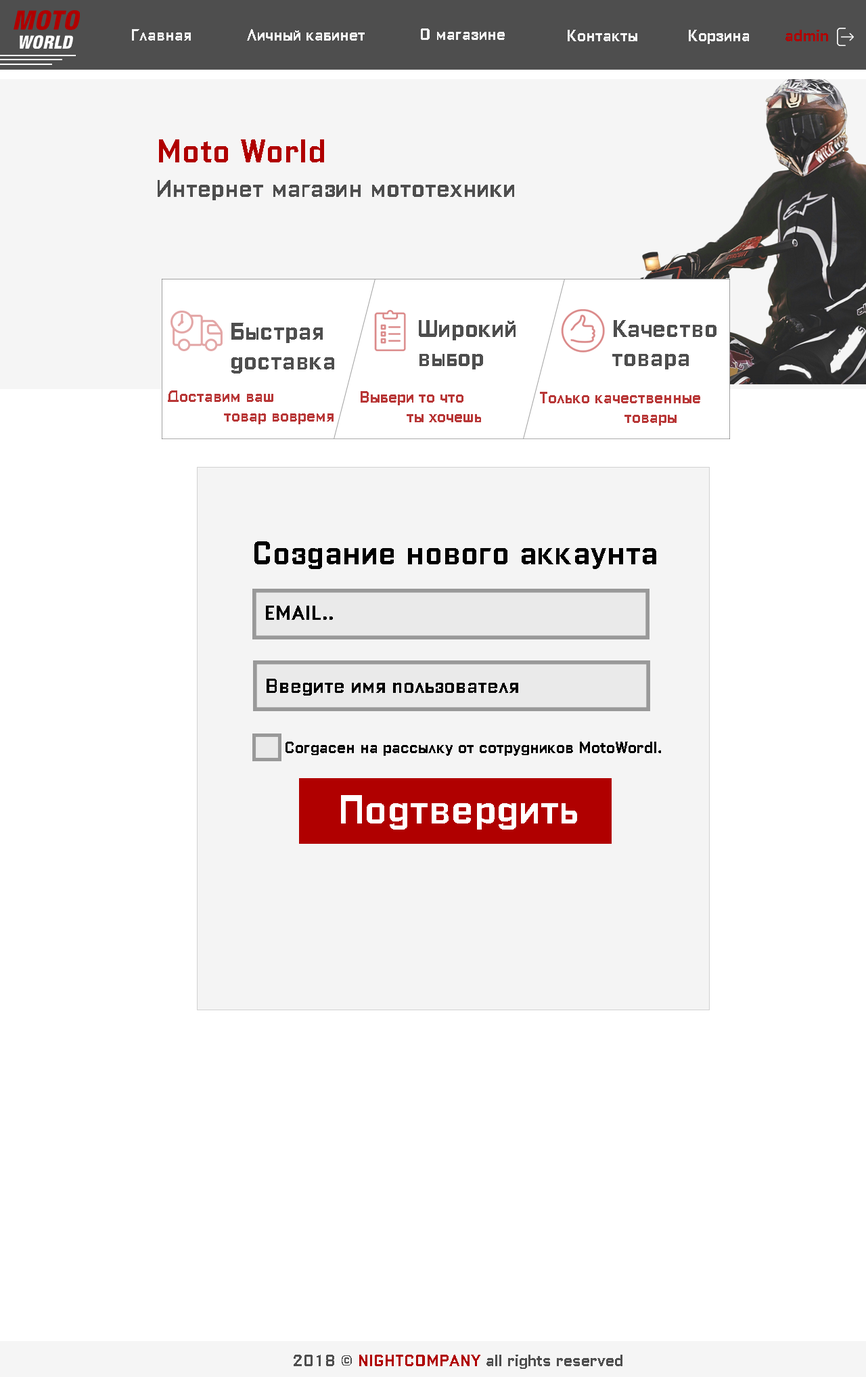
<style>
.page{position:relative;width:866px;height:1377px;background:#ffffff}
.page>*{position:absolute;margin:0}
.t1{font:16.2px "ColumbiaPrintCyrillic";color:#f4f4f4}
.t2{font:16.2px "ColumbiaPrintCyrillic";color:#b00000}
.t3{font:32.5px "ColumbiaPrintCyrillic";color:#b00000}
.t4{font:24.4px "ColumbiaPrintCyrillic";color:#4e4e4e}
.t5{font:24.3px "ColumbiaPrintCyrillic";color:#4e4e4e}
.t6{font:16.2px "ColumbiaPrintCyrillic";color:#b83737}
.t7{font:32.5px "ColumbiaPrintCyrillic";color:#000000}
.t8{font:20.3px "ColumbiaPrintCyrillic";color:#000000}
.t9{font:16.2px "ColumbiaPrintCyrillic";color:#000000}
.t10{font:40.6px "ColumbiaPrintCyrillic";color:#ffffff}
.t11{font:16.2px "ColumbiaPrintCyrillic";color:#4e4e4e}
</style>
<div class="page">
<p class="t1" style="left:132px;top:29px;width:59px;height:12px">Главная</p>
<p class="t1" style="left:247px;top:29px;width:118px;height:12px">Личный кабинет</p>
<p class="t1" style="left:421px;top:28px;width:84px;height:12px">О магазине</p>
<p class="t1" style="left:568px;top:30px;width:69px;height:11px">Контакты</p>
<p class="t1" style="left:689px;top:30px;width:60px;height:14px">Корзина</p>
<p class="t2" style="left:786px;top:30px;width:42px;height:11px">admin</p>
<p class="t3" style="left:159px;top:139px;width:165px;height:23px">Moto World</p>
<p class="t4" style="left:158px;top:180px;width:356px;height:20px">Интернет магазин мототехники</p>
<p class="t5" style="left:231px;top:323px;width:103px;height:50px">Быстрая<br>доставка</p>
<p class="t5" style="left:419px;top:320px;width:97px;height:49px">Широкий <br>выбор</p>
<p class="t5" style="left:612px;top:320px;width:105px;height:49px">Качество товара</p>
<p class="t6" style="left:168px;top:390px;width:166px;height:34px">Доставим ваш <br>            товар вовремя</p>
<p class="t6" style="left:361px;top:391px;width:120px;height:31px">Выбери то что <br>          ты хочешь</p>
<p class="t6" style="left:540px;top:392px;width:160px;height:34px">Только качественные <br>                  товары</p>
<p class="t7" style="left:254px;top:541px;width:402px;height:28px">Создание нового аккаунта</p>
<p class="t8" style="left:266px;top:606px;width:67px;height:14px">EMAIL..</p>
<p class="t8" style="left:267px;top:679px;width:251px;height:17px">Введите имя пользователя</p>
<p class="t9" style="left:286px;top:742px;width:375px;height:14px">Согдасен на рассылку от сотрудников MotoWordl.</p>
<p class="t10" style="left:341px;top:795px;width:236px;height:35px">Подтвердить</p>
<p class="t11" style="left:294px;top:1355px;width:328px;height:14px">2018 © <span class="t2">NIGHTCOMPANY </span>all rights reserved</p>
</div>
